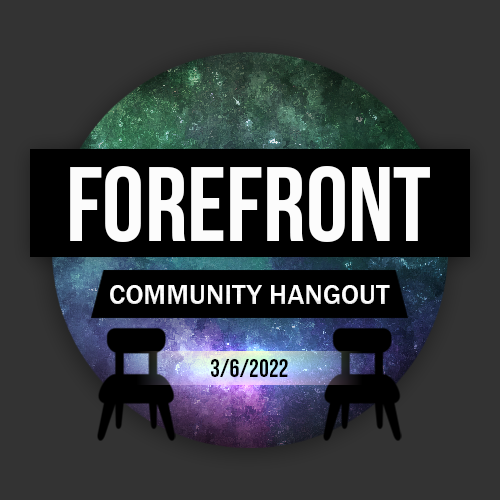
<style>
.page{position:relative;width:500px;height:500px;background:#333333}
.page>*{position:absolute;margin:0}
.t1{font:106.2px "BebasNeue";color:#ffffff}
.t2{font:28.3px "FranklinGothic-Medium";color:#ffffff}
.t3{font:25px "BebasNeue";color:#000000}
</style>
<div class="page">
<p class="t1" style="left:70px;top:166px;width:360px;height:76px">FOREFRONT</p>
<p class="t2" style="left:110px;top:285px;width:280px;height:19px">COMMUNITY HANGOUT</p>
<p class="t3" style="left:211px;top:359px;width:77px;height:18px">3/6/2022</p>
</div>
